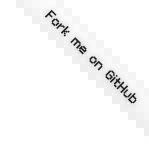
<style>
.page{position:relative;width:149px;height:149px;background:#ffffff}
.page>*{position:absolute;margin:0}
.t1{font:12px "VolterGoldfish";color:#1f1f1f}
</style>
<div class="page">
<p class="t1" style="left:45px;top:9px;width:92px;height:95px;rotate:45deg">Fork me on GitHub</p>
</div>
